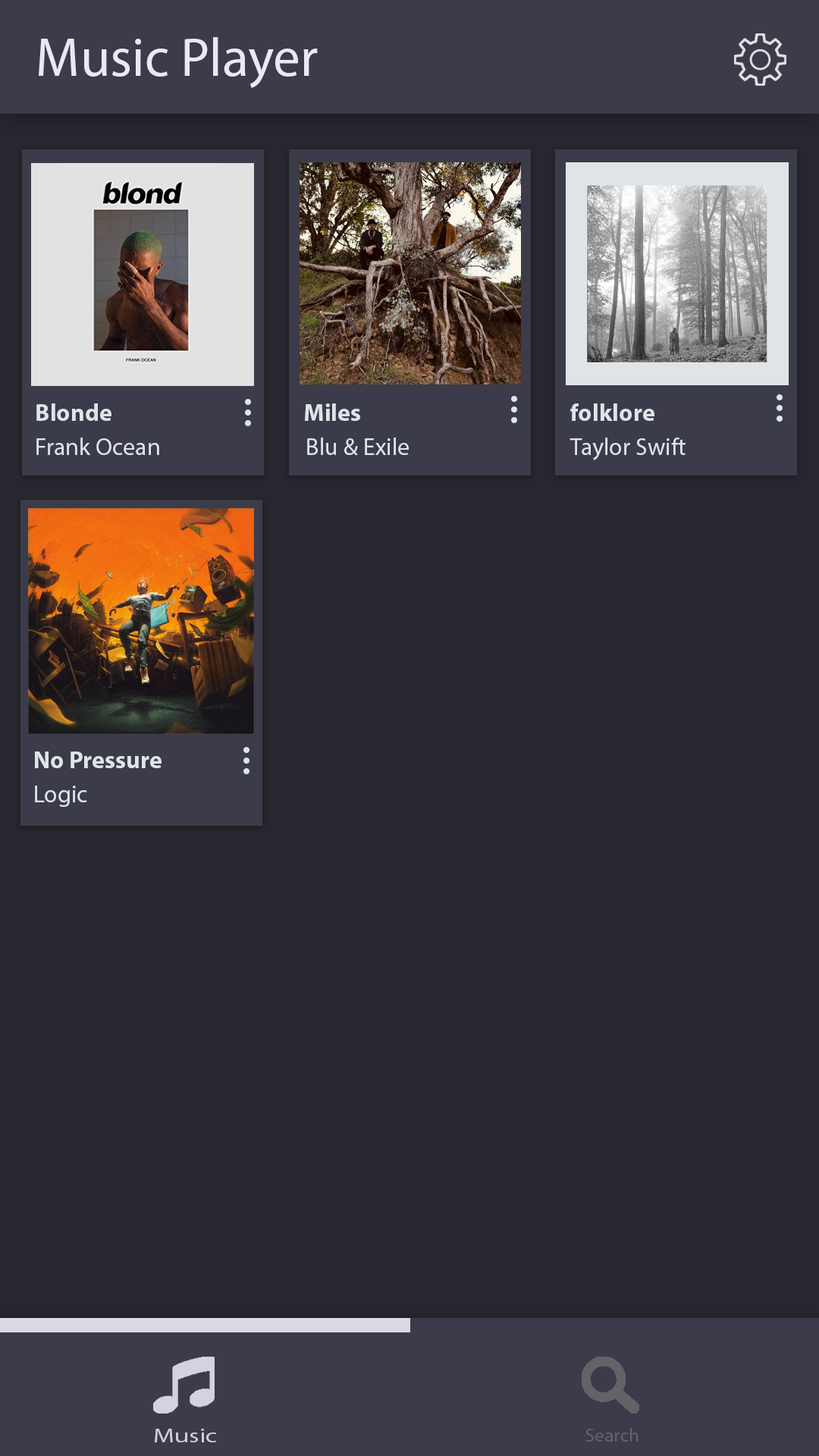
<style>
.page{position:relative;width:819px;height:1456px;background:#27272f}
.page>*{position:absolute;margin:0}
.t1{font:54.6px "MyriadPro-Regular";color:#e9e9f3}
.t2{font:24.3px "MyriadPro-Bold";color:#e0e4e7}
.t3{font:24.3px "MyriadPro-Regular";color:#e0e4e7}
.t4{font:19.4px "MyriadPro-Regular";color:#ceceda;scale:1.36 1}
.t5{font:18.6px "MyriadPro-Regular";color:#636266;scale:1.05 1}
</style>
<div class="page">
<p class="t1" style="left:39px;top:37px;width:279px;height:51px">Music Player</p>
<p class="t2" style="left:36px;top:403px;width:75px;height:18px">Blonde</p>
<p class="t2" style="left:305px;top:403px;width:55px;height:18px">Miles</p>
<p class="t2" style="left:570px;top:403px;width:84px;height:18px">folklore</p>
<p class="t3" style="left:36px;top:438px;width:123px;height:17px">Frank Ocean</p>
<p class="t3" style="left:307px;top:438px;width:102px;height:17px">Blu &amp; Exile</p>
<p class="t3" style="left:570px;top:438px;width:116px;height:22px">Taylor Swift</p>
<p class="t2" style="left:35px;top:751px;width:127px;height:17px">No Pressure</p>
<p class="t3" style="left:35px;top:786px;width:52px;height:21px">Logic</p>
<p class="t4" style="left:155px;top:1429px;width:62px;height:13px">Music</p>
<p class="t5" style="left:585px;top:1428px;width:54px;height:14px">Search</p>
</div>
